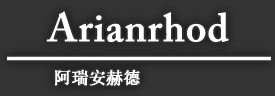
<style>
.page{position:relative;width:275px;height:96px;background:#333333}
.page>*{position:absolute;margin:0}
.t1{font:40px "ACaslonPro-Semibold";color:#ffffff;font-weight:bold}
.t2{font:71px "ACaslonPro-Semibold";color:#ffffff;scale:0.68 1}
.t3{font:17px "System";color:#ffffff;font-weight:bold}
</style>
<div class="page">
<p class="t1" style="left:46px;top:11px;width:183px;height:31px">Arianrhod</p>
<p class="t2" style="left:7px;top:56px;width:264px;height:5px">___________</p>
<p class="t3" style="left:55px;top:69px;width:85px;height:17px">阿瑞安赫德</p>
</div>
